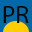
<style>
.page{position:relative;width:32px;height:32px;background:#016aa6}
.page>*{position:absolute;margin:0}
.t1{font:25px "MyriadPro-Regular";color:#060604}
</style>
<div class="page">
<p class="t1" style="left:3px;top:6px;width:26px;height:17px">PR</p>
</div>
